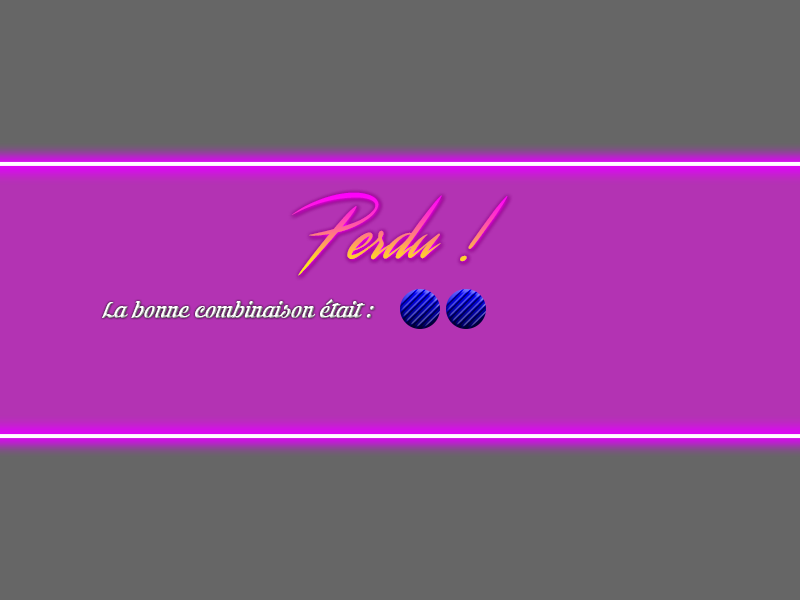
<style>
.page{position:relative;width:800px;height:600px;background:#666666}
.page>*{position:absolute;margin:0}
.t1{font:70px "Streamster"}
.t2{font:30px "KrinkesRegularPERSONALUSE"}
</style>
<div class="page">
<p class="t1" style="left:291px;top:192px;width:217px;height:84px">Perdu !</p>
<p class="t2" style="left:102px;top:299px;width:273px;height:19px">La bonne combinaison était :</p>
</div>
